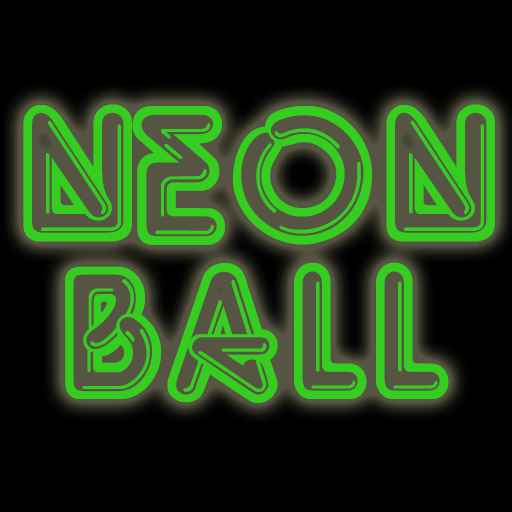
<style>
.page{position:relative;width:512px;height:512px;background:#000000}
.page>*{position:absolute;margin:0}
.t1{font:198.6px/158.5px "NeonLights-";letter-spacing:-0.05em;color:#34cd20}
.t2{font:198.6px/158.5px "NeonLights-";color:#34cd20}
.t3{font:198.6px/158.5px "NeonLights-";letter-spacing:-0.1em;color:#34cd20}
.t4{font:198.6px/158.5px "NeonLights-";letter-spacing:-0.01em;color:#34cd20}
</style>
<div class="page">
<p class="t1" style="left:23px;top:104px;width:472px;height:299px;text-align:center"><span class="t2">N</span>EO<span class="t2">N<br></span><span class="t3">b</span><span class="t4">a</span><span class="t2">ll</span></p>
</div>
